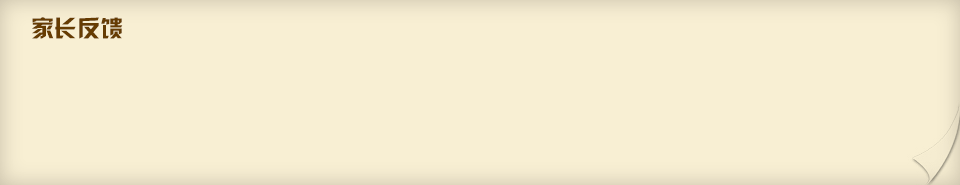
<style>
.page{position:relative;width:960px;height:185px;background:#f8efd3}
.page>*{position:absolute;margin:0}
.t1{font:23.1px "HYk2gj";color:#663c02}
</style>
<div class="page">
<p class="t1" style="left:32px;top:17px;width:91px;height:22px">家长反馈</p>
</div>
